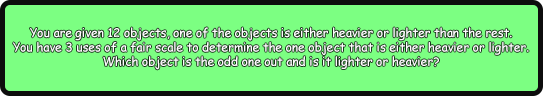
<style>
.page{position:relative;width:544px;height:96px;background:#7cff82}
.page>*{position:absolute;margin:0}
.t1{font:12px "ComicSansMS";color:#ffffff}
</style>
<div class="page">
<p class="t1" style="left:13px;top:27px;width:516px;height:43px;text-align:center">You are given 12 objects, one of the objects is either heavier or lighter than the rest.<br>You have 3 uses of a fair scale to determine the one object that is either heavier or lighter.<br>Which object is the odd one out and is it lighter or heavier?</p>
</div>
